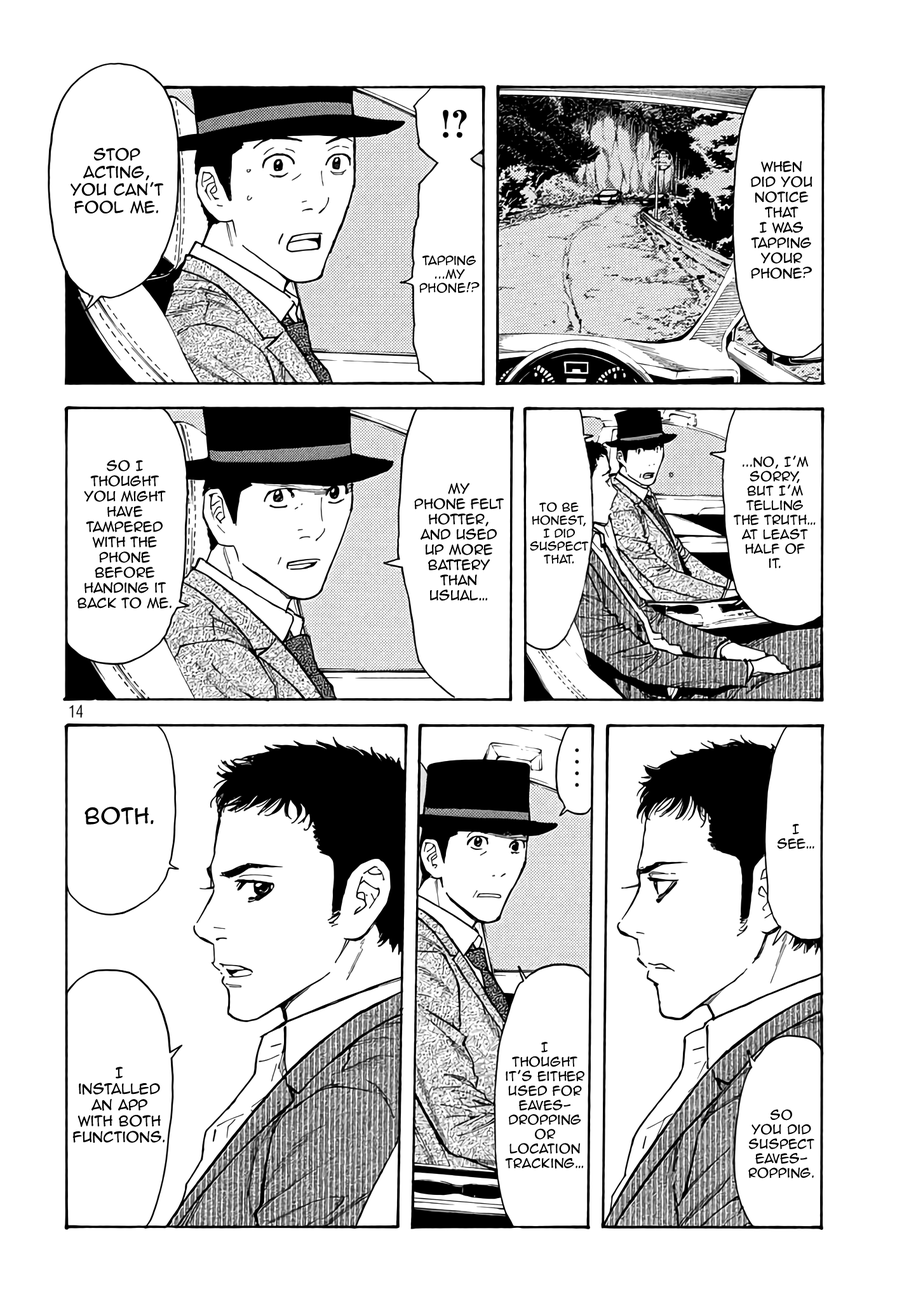
<style>
.page{position:relative;width:916px;height:1301px;background:#ffffff}
.page>*{position:absolute;margin:0}
.t1{font:14.6px "AnimeAce2.0BB";color:#000000}
.t2{font:12.7px "AnimeAce2.0BB";color:#000000}
.t3{font:11.4px "AnimeAce2.0BB";color:#000000}
.t4{font:12.1px "AnimeAce2.0BB";color:#000000}
.t5{font:10.8px "AnimeAce2.0BB";color:#000000}
.t6{font:20.3px "AnimeAce2.0BB";color:#000000}
.t7{font:13.3px "AnimeAce2.0BB";color:#000000}
</style>
<div class="page">
<p class="t1" style="left:71px;top:147px;width:93px;height:67px;text-align:center">Stop acting,<br>You can’t fool me.</p>
<p class="t2" style="left:751px;top:161px;width:62px;height:118px;text-align:center">when <br>did you notice that <br>I was tapping your phone?</p>
<p class="t3" style="left:419px;top:255px;width:61px;height:39px;text-align:center">tapping ...my phone!?</p>
<p class="t2" style="left:78px;top:460px;width:94px;height:149px;text-align:center">so I <br>thought <br>you might have tampered with the phone before handing it back to me.</p>
<p class="t4" style="left:734px;top:456px;width:82px;height:113px;text-align:center">...No, I’m sorry, <br>but I’m telling the truth… <br>At least half of <br>it.</p>
<p class="t2" style="left:414px;top:483px;width:90px;height:118px;text-align:center">My <br>phone felt hotter, <br>and used up more battery than usual…</p>
<p class="t5" style="left:530px;top:502px;width:59px;height:62px;text-align:center">To be honest, I did suspect that.</p>
<p class="t6" style="left:85px;top:807px;width:69px;height:18px">Both.</p>
<p class="t4" style="left:778px;top:824px;width:37px;height:26px;text-align:center">I see…</p>
<p class="t4" style="left:505px;top:1042px;width:80px;height:127px;text-align:center">I <br>thought it’s either used for eaves-<br>dropping <br>or location tracking…</p>
<p class="t7" style="left:72px;top:1067px;width:93px;height:76px;text-align:center">I <br>installed an app <br>with both functions.</p>
<p class="t4" style="left:749px;top:1109px;width:66px;height:70px;text-align:center">So<br>you did suspect eaves-<br>ropping.</p>
</div>
